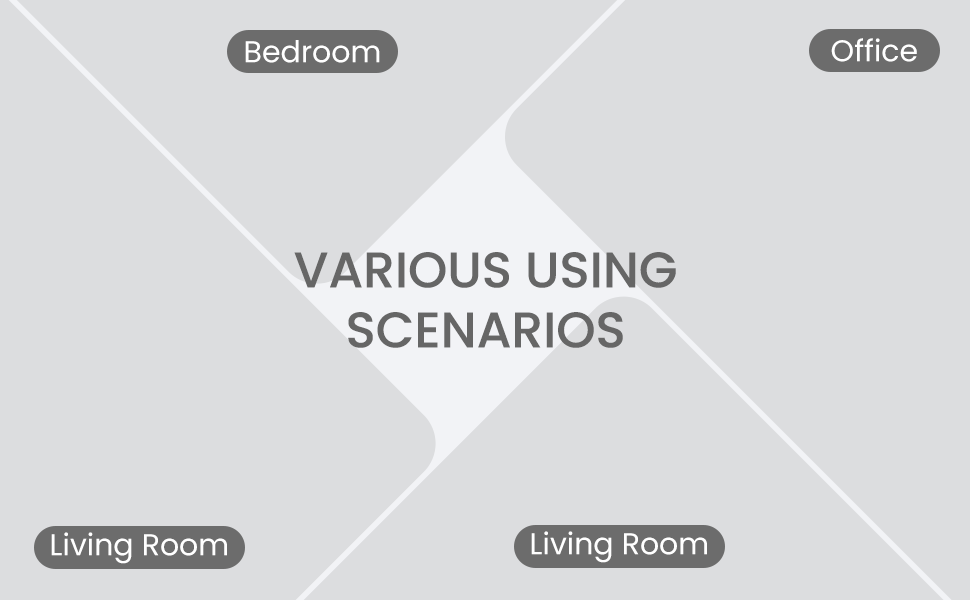
<style>
.page{position:relative;width:970px;height:600px;background:#dcdddf}
.page>*{position:absolute;margin:0}
.t1{font:30px "Poppins-Regular";color:#ffffff}
.t2{font:50px "Poppins-Medium";color:#666666}
</style>
<div class="page">
<p class="t1" style="left:245px;top:40px;width:135px;height:23px">Bedroom</p>
<p class="t1" style="left:831px;top:38px;width:86px;height:24px">Office</p>
<p class="t2" style="left:294px;top:252px;width:382px;height:96px;text-align:center">VARIOUS USING<br>SCENARIOS</p>
<p class="t1" style="left:51px;top:532px;width:176px;height:32px">Living Room</p>
<p class="t1" style="left:531px;top:531px;width:176px;height:32px">Living Room</p>
</div>
